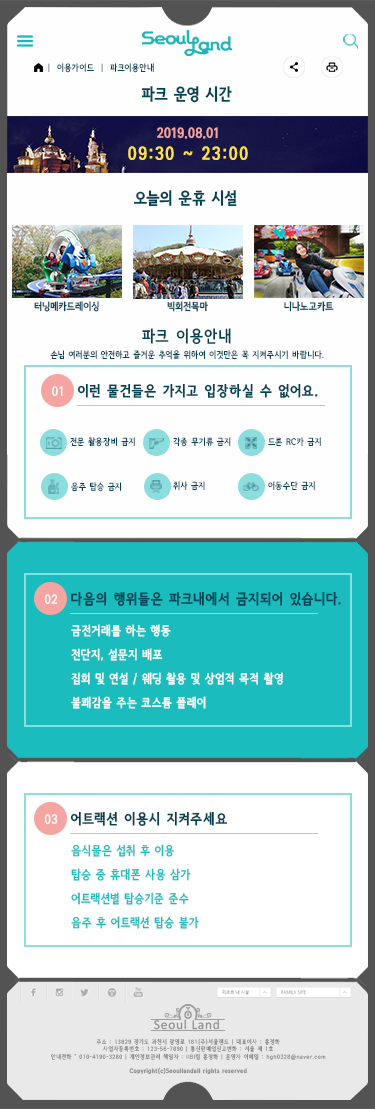
<style>
.page{position:relative;width:375px;height:1109px;background:#fefefe}
.page>*{position:absolute;margin:0}
.t1{font:9px "SeN-CL";letter-spacing:0.05em;color:#014254}
.t2{font:16px "SeN-CBL";letter-spacing:0.05em;color:#014254}
.t3{font:14px "SeN-CBL";letter-spacing:0.05em;color:#f4a5a1}
.t4{font:18px "SeN-CBL";letter-spacing:0.1em;color:#ffe246}
.t5{font:10px "SeN-CEB";letter-spacing:0.05em;color:#014254}
.t6{font:16px "SeN-CEB";letter-spacing:0.1em;color:#014254}
.t7{font:12.9px "SeN-CEB";letter-spacing:0.05em;color:#ffffff}
.t8{font:12.9px "SeN-CBL";letter-spacing:0.05em;color:#014254}
.t9{font:14px "SeN-CBL";letter-spacing:0.1em;color:#014254}
.t10{font:12px/24px "SeN-CEB";letter-spacing:0.05em;color:#fefefe}
.t11{font:12px/24px "SeN-CEB";letter-spacing:0.05em;color:#1abcbd}
.t12{font:6px "SeN-CL";letter-spacing:0.1em;color:#8e8e8e}
.t13{font:6px "SeN-CBL";letter-spacing:0.1em;color:#8e8e8e}
</style>
<div class="page">
<p class="t1" style="left:48px;top:63px;width:106px;height:10px">|  이용가이드  |  파크이용안내</p>
<p class="t2" style="left:141px;top:86px;width:91px;height:17px">파크 운영 시간</p>
<p class="t3" style="left:157px;top:127px;width:61px;height:12px">2019.08.01</p>
<p class="t4" style="left:128px;top:146px;width:120px;height:14px">09:30 ~ 23:00</p>
<p class="t2" style="left:133px;top:190px;width:104px;height:17px">오늘의 운휴 시설</p>
<p class="t5" style="left:34px;top:301px;width:65px;height:11px">터닝메카드레이싱</p>
<p class="t5" style="left:167px;top:301px;width:41px;height:11px">빅회전목마</p>
<p class="t5" style="left:284px;top:301px;width:50px;height:11px">니나노고카트</p>
<p class="t6" style="left:142px;top:328px;width:89px;height:17px">파크 이용안내</p>
<p class="t1" style="left:50px;top:350px;width:274px;height:10px">손님 여러분의 안전하고 즐거운 추억을 위하여 이것만은 꼭 지켜주시기 바랍니다.</p>
<p class="t7" style="left:52px;top:386px;width:11px;height:10px"><span class="t8"><br><br><br><br><br><br><br><br><br><br></span>01</p>
<p class="t9" style="left:77px;top:383px;width:241px;height:15px">이런 물건들은 가지고 입장하실 수 없어요.</p>
<p class="t1" style="left:70px;top:437px;width:65px;height:10px">전문 촬용장비 금지</p>
<p class="t1" style="left:173px;top:437px;width:58px;height:10px">각종 무기류 금지</p>
<p class="t1" style="left:268px;top:437px;width:53px;height:9px">드론 RC카 금지</p>
<p class="t1" style="left:71px;top:482px;width:50px;height:10px">음주 탑승 금지</p>
<p class="t1" style="left:173px;top:481px;width:32px;height:9px">취사 금지</p>
<p class="t1" style="left:268px;top:481px;width:47px;height:10px">이동수단 금지</p>
<p class="t9" style="left:71px;top:591px;width:270px;height:15px">다음의 행위들은 파크내에서 금지되어 있습니다.</p>
<p class="t7" style="left:44px;top:594px;width:13px;height:11px"><span class="t8"><br><br><br><br><br><br><br><br><br><br></span>02</p>
<p class="t10" style="left:71px;top:624px;width:212px;height:85px;text-align:justify">금전거래를 하는 행동<br>전단지, 설문지 배포<br>집회 및 연설 / 웨딩 촬용 및 상업적 목적 촬영<br>불쾌감을 주는 코스튬 플레이</p>
<p class="t7" style="left:44px;top:814px;width:14px;height:11px"><span class="t8"><br><br><br><br><br><br><br><br><br><br></span>03</p>
<p class="t9" style="left:70px;top:811px;width:157px;height:15px">어트랙션 이용시 지켜주세요</p>
<p class="t11" style="left:71px;top:844px;width:128px;height:85px;text-align:justify">음식물은 섭취 후 이용<br>탑승 중 휴대폰 사용 삼가<br>어트랙션별 탑승기준 준수<br>음주 후 어트랙션 탑승 불가</p>
<p class="t12" style="left:51px;top:1038px;width:275px;height:36px;text-align:center">주소 : 13829 경기도 과천시 광명로 181(주)서울랜드 | 대표이사 : 홍정화<br>사업자등록번호 : 123-56-7890 | 통신판매업신고번화 : 서울 제 1호<br>안내전화 “ 010-4190-3280 | 개인정보관리 책임자 : IIBI팀 홍정화 | 운영자 이메일 : hgh0328@naver.com<br><br><span class="t13">Copyright(c)Seoullandall rights reserved</span></p>
</div>
